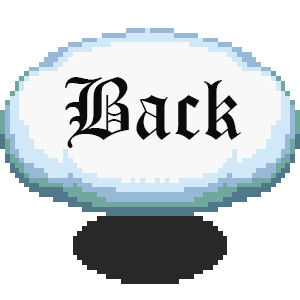
<style>
.page{position:relative;width:300px;height:300px;background:#ffffff}
.page>*{position:absolute;margin:0}
.t1{font:85px "OldEnglishTextMT";color:#0b0b0b}
</style>
<div class="page">
<p class="t1" style="left:65px;top:77px;width:176px;height:71px">Back</p>
</div>
